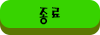
<style>
.page{position:relative;width:100px;height:35px;background:#37d300}
.page>*{position:absolute;margin:0}
.t1{font:18px "MagicR-HM";color:#000000}
</style>
<div class="page">
<p class="t1" style="left:39px;top:7px;width:21px;height:18px">종료</p>
</div>
